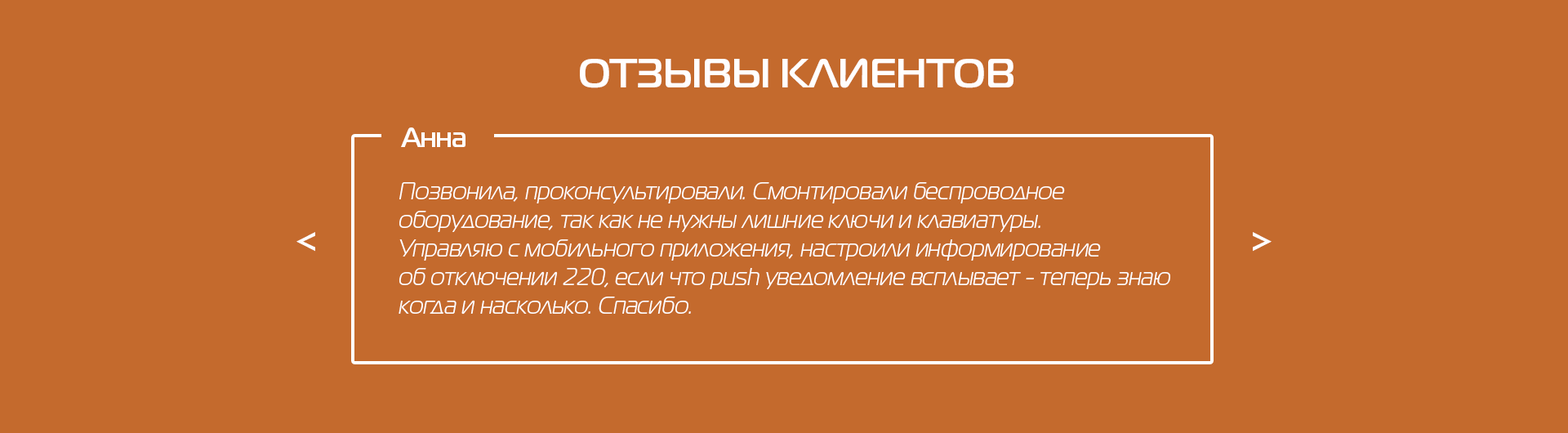
<style>
.page{position:relative;width:1568px;height:433px;background:#c46a2d}
.page>*{position:absolute;margin:0}
.t1{font:40.8px "MagistralC-Bold";color:#fffefe;text-transform:uppercase}
.t2{font:27.2px "MagistralC-Bold";color:#fffefe}
.t3{font:23.8px "MagistralC";color:#fffefe;font-style:italic}
.t4{font:40.8px "MagistralC-Bold";color:#fffefe}
</style>
<div class="page">
<p class="t1" style="left:580px;top:58px;width:433px;height:30px">ОТЗЫВЫ КЛИЕНТОВ</p>
<p class="t2" style="left:401px;top:127px;width:65px;height:20px">Анна</p>
<p class="t3" style="left:399px;top:182px;width:771px;height:132px">Позвонила, проконсультировали. Смонтировали беспроводное <br>оборудование, так как не нужны лишние ключи и клавиатуры. <br>Управляю с мобильного приложения, настроили информирование <br>об отключении 220, если что push уведомление всплывает - теперь знаю<br>когда и насколько. Спасибо.</p>
<p class="t4" style="left:296px;top:232px;width:19px;height:20px">&lt;</p>
<p class="t4" style="left:1253px;top:232px;width:19px;height:20px">&gt;</p>
</div>
